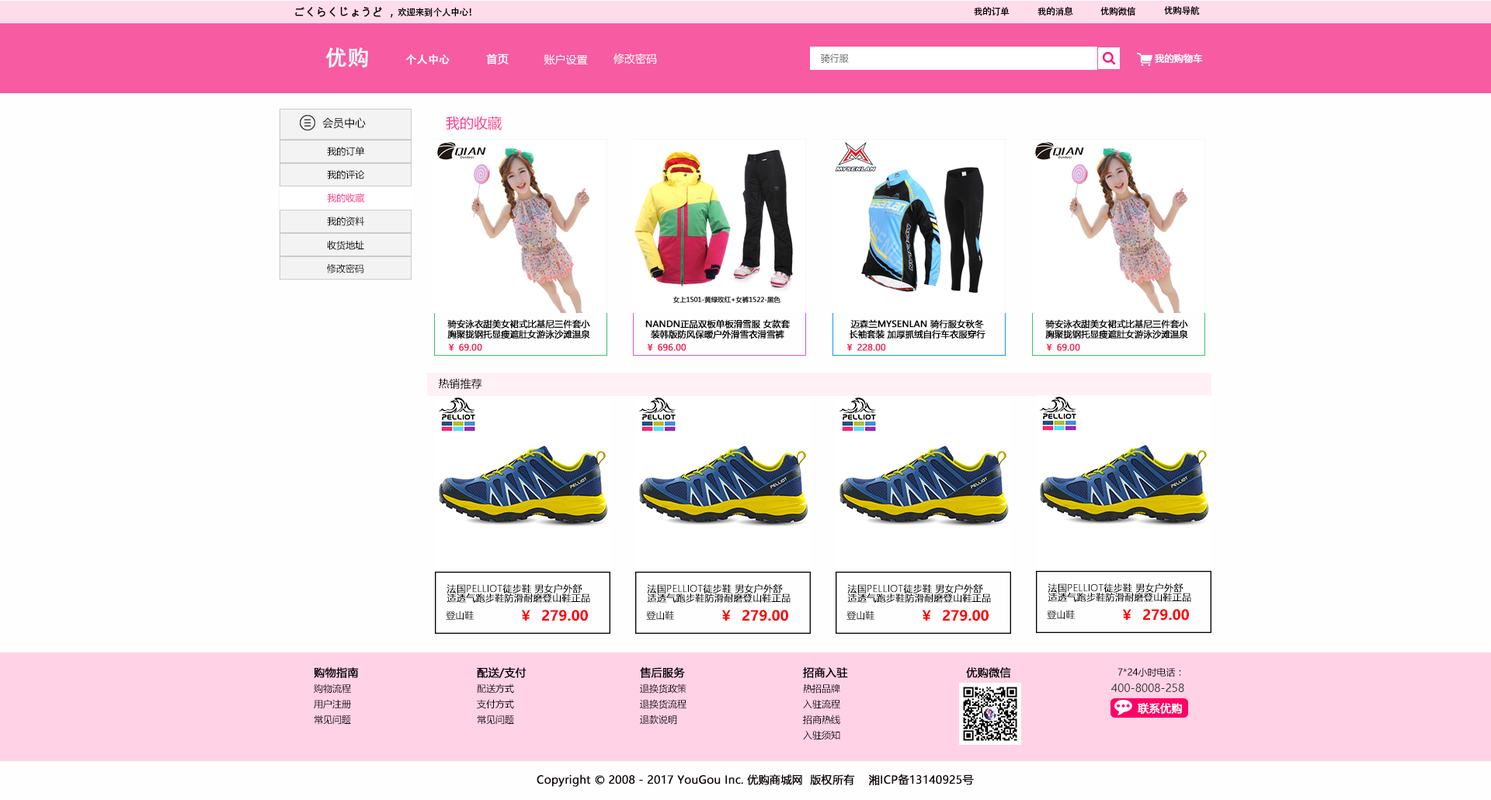
<style>
.page{position:relative;width:1491px;height:800px;background:#fffeff}
.page>*{position:absolute;margin:0}
.t1{font:10.9px "MicrosoftYaHei";color:#040000;font-weight:bold}
.t2{font:9.1px "AdobeHeitiStd-Regular";letter-spacing:-0.025em;color:#000000}
.t3{font:21.7px "AdobeHeitiStd-Regular";color:#ffffff;font-weight:bold}
.t4{font:10.9px "MicrosoftYaHei";color:#ffffff;font-weight:bold}
.t5{font:10.9px "MicrosoftYaHei";color:#ffffff}
.t6{font:9.3px "MicrosoftYaHei";color:#666666}
.t7{font:9.3px "MicrosoftYaHei";color:#ffffff;font-weight:bold}
.t8{font:10.9px "AdobeHeitiStd-Regular";color:#ffffff;font-weight:bold}
.t9{font:10.9px "MicrosoftYaHei";color:#040000}
.t10{font:14px "MicrosoftYaHei";color:#f73a8f}
.t11{font:9.3px "MicrosoftYaHei";color:#040000}
.t12{font:9.3px "MicrosoftYaHei";color:#000000}
.t13{font:9.3px "MicrosoftYaHei";color:#f73d90}
.t14{font:9.3px "MicrosoftYaHei";color:#060001}
.t15{font:8.7px/10.1px "MicrosoftYaHei";color:#000000;font-weight:bold}
.t16{font:8.7px "MicrosoftYaHei";color:#ee2454;font-weight:bold}
.t17{font:9.3px/9.3px "MicrosoftYaHeiLight";color:#000000;font-weight:bold}
.t18{font:14px "MicrosoftYaHei-Bold";color:#fd0000}
.t19{font:10.9px "MicrosoftYaHei";color:#323333}
.t20{font:10.9px "MicrosoftYaHei";color:#0e050a;font-weight:bold}
</style>
<div class="page">
<p class="t1" style="left:295px;top:7px;width:176px;height:11px">ごくらくじょうど ，<span class="t2">欢迎来到个人中心！</span></p>
<p class="t2" style="left:974px;top:6px;width:35px;height:10px">我的订单</p>
<p class="t2" style="left:1037px;top:6px;width:36px;height:10px">我的消息</p>
<p class="t2" style="left:1100px;top:6px;width:35px;height:10px">优购微信</p>
<p class="t2" style="left:1164px;top:6px;width:36px;height:10px">优购导航</p>
<p class="t3" style="left:325px;top:47px;width:43px;height:21px">优购</p>
<p class="t4" style="left:486px;top:54px;width:23px;height:10px">首页</p>
<p class="t5" style="left:613px;top:53px;width:44px;height:11px">修改密码</p>
<p class="t6" style="left:821px;top:54px;width:28px;height:9px">骑行服</p>
<p class="t7" style="left:1155px;top:54px;width:48px;height:10px">我的购物车</p>
<p class="t8" style="left:405px;top:54px;width:45px;height:11px">个人中心</p>
<p class="t5" style="left:544px;top:54px;width:44px;height:11px">账户设置</p>
<p class="t9" style="left:322px;top:117px;width:44px;height:12px">会员中心</p>
<p class="t10" style="left:446px;top:116px;width:56px;height:14px">我的收藏</p>
<p class="t11" style="left:327px;top:146px;width:38px;height:10px">我的订单</p>
<p class="t12" style="left:327px;top:170px;width:38px;height:9px">我的评论</p>
<p class="t13" style="left:327px;top:193px;width:38px;height:10px">我的收藏</p>
<p class="t14" style="left:327px;top:216px;width:37px;height:10px">我的资料</p>
<p class="t14" style="left:327px;top:241px;width:37px;height:9px">收货地址</p>
<p class="t14" style="left:327px;top:264px;width:37px;height:9px">修改密码</p>
<p class="t15" style="left:447px;top:319px;width:143px;height:20px;text-align:center">骑安泳衣甜美女裙式比基尼三件套小<br>胸聚拢钢托显瘦遮肚女游泳沙滩温泉</p>
<p class="t15" style="left:645px;top:319px;width:145px;height:20px;text-align:center">NANDN正品双板单板滑雪服 女款套<br>装韩版防风保暧户外滑雪衣滑雪裤</p>
<p class="t15" style="left:849px;top:319px;width:136px;height:20px;text-align:center">迈森兰MYSENLAN 骑行服女秋冬<br>长袖套装 加厚抓绒自行车衣服穿行</p>
<p class="t15" style="left:1045px;top:319px;width:143px;height:20px;text-align:center">骑安泳衣甜美女裙式比基尼三件套小<br>胸聚拢钢托显瘦遮肚女游泳沙滩温泉</p>
<p class="t16" style="left:448px;top:343px;width:34px;height:8px">￥ 69.00</p>
<p class="t16" style="left:647px;top:343px;width:39px;height:8px">￥ 696.00</p>
<p class="t16" style="left:846px;top:343px;width:40px;height:8px">￥ 228.00</p>
<p class="t16" style="left:1046px;top:343px;width:34px;height:8px">￥ 69.00</p>
<p class="t9" style="left:439px;top:378px;width:43px;height:11px">热销推荐</p>
<p class="t17" style="left:446px;top:584px;width:144px;height:19px">法国PELLIOT徒步鞋 男女户外舒<br>适透气跑步鞋防滑耐磨登山鞋正品</p>
<p class="t17" style="left:647px;top:584px;width:143px;height:19px">法国PELLIOT徒步鞋 男女户外舒<br>适透气跑步鞋防滑耐磨登山鞋正品</p>
<p class="t17" style="left:847px;top:584px;width:144px;height:19px">法国PELLIOT徒步鞋 男女户外舒<br>适透气跑步鞋防滑耐磨登山鞋正品</p>
<p class="t17" style="left:1048px;top:583px;width:143px;height:19px">法国PELLIOT徒步鞋 男女户外舒<br>适透气跑步鞋防滑耐磨登山鞋正品</p>
<p class="t11" style="left:446px;top:610px;width:28px;height:10px">登山鞋</p>
<p class="t18" style="left:521px;top:610px;width:67px;height:11px">￥  279.00</p>
<p class="t11" style="left:646px;top:610px;width:28px;height:10px">登山鞋</p>
<p class="t18" style="left:721px;top:610px;width:67px;height:11px">￥  279.00</p>
<p class="t11" style="left:846px;top:610px;width:28px;height:10px">登山鞋</p>
<p class="t18" style="left:922px;top:610px;width:66px;height:11px">￥  279.00</p>
<p class="t11" style="left:1047px;top:610px;width:28px;height:10px">登山鞋</p>
<p class="t18" style="left:1122px;top:609px;width:67px;height:11px">￥  279.00</p>
<p class="t1" style="left:314px;top:667px;width:45px;height:11px">购物指南</p>
<p class="t1" style="left:477px;top:667px;width:49px;height:11px">配送/支付</p>
<p class="t1" style="left:640px;top:667px;width:45px;height:11px">售后服务</p>
<p class="t1" style="left:803px;top:667px;width:45px;height:11px">招商入驻</p>
<p class="t1" style="left:966px;top:667px;width:45px;height:11px">优购微信</p>
<p class="t11" style="left:1117px;top:667px;width:64px;height:10px">7*24小时电话：</p>
<p class="t11" style="left:314px;top:683px;width:37px;height:10px">购物流程</p>
<p class="t11" style="left:477px;top:683px;width:37px;height:10px">配送方式</p>
<p class="t11" style="left:640px;top:683px;width:46px;height:10px">退换货政策</p>
<p class="t11" style="left:803px;top:683px;width:37px;height:10px">热招品牌</p>
<p class="t19" style="left:1111px;top:683px;width:73px;height:9px">400-8008-258</p>
<p class="t11" style="left:314px;top:699px;width:37px;height:10px">用户注册</p>
<p class="t11" style="left:477px;top:699px;width:37px;height:10px">支付方式</p>
<p class="t11" style="left:640px;top:699px;width:46px;height:10px">退换货流程</p>
<p class="t11" style="left:803px;top:699px;width:37px;height:10px">入驻流程</p>
<p class="t4" style="left:1138px;top:703px;width:44px;height:11px">联系优购</p>
<p class="t11" style="left:314px;top:714px;width:37px;height:10px">常见问题</p>
<p class="t11" style="left:477px;top:714px;width:37px;height:10px">常见问题</p>
<p class="t11" style="left:640px;top:714px;width:37px;height:10px">退款说明</p>
<p class="t11" style="left:803px;top:714px;width:37px;height:10px">招商热线</p>
<p class="t11" style="left:803px;top:730px;width:37px;height:10px">入驻须知</p>
<p class="t20" style="left:537px;top:773px;width:437px;height:14px">Copyright © 2008 - 2017 YouGou Inc. 优购商城网  版权所有    湘ICP备13140925号</p>
</div>
